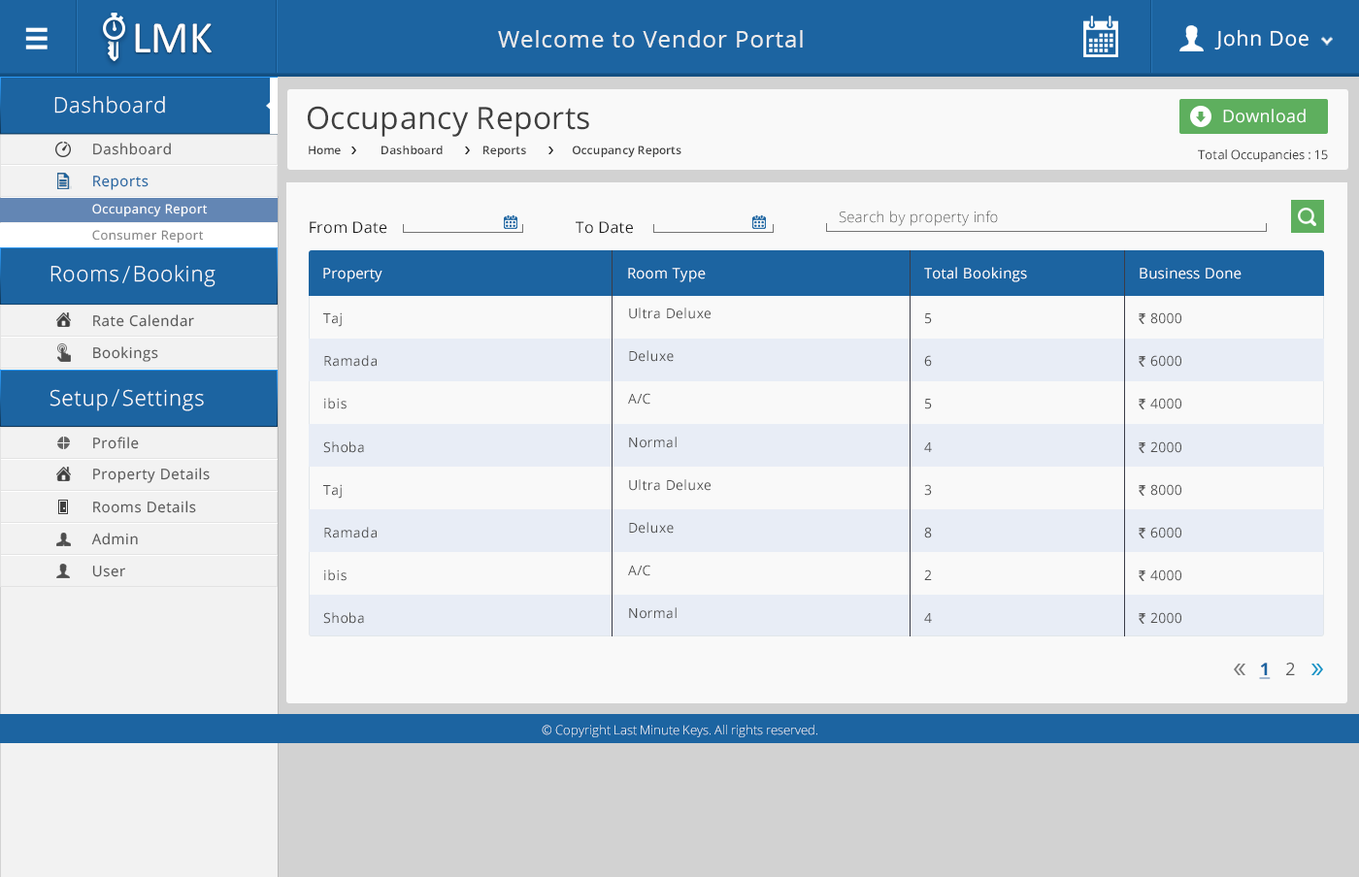
<style>
.page{position:relative;width:1359px;height:877px;background:#f9f9f9}
.page>*{position:absolute;margin:0}
.t1{font:45.2px "Calibri";letter-spacing:0.01em;color:#ffffff}
.t2{font:20.4px "OpenSans";letter-spacing:0.04em;color:#ffffff}
.t3{font:23.3px "OpenSans";letter-spacing:0.04em;color:#ececec}
.t4{font:24.9px "NexaBold";letter-spacing:0.04em;color:#f9f9f9}
.t5{font:21.4px "OpenSans-Light";letter-spacing:0.04em;color:#ffffff}
.t6{font:31.1px "OpenSans";letter-spacing:0.01em;color:#3f3f3f}
.t7{font:17.5px "OpenSans";letter-spacing:0.01em;color:#ffffff}
.t8{font:14.6px "OpenSans";letter-spacing:0.04em;color:#585858}
.t9{font:11.6px "OpenSans-Semibold";letter-spacing:0.01em;color:#3f3f3f}
.t10{font:12.6px "OpenSans";letter-spacing:0.01em;color:#3f3f3f}
.t11{font:14.6px "OpenSans";letter-spacing:0.04em;color:#1c64a1}
.t12{font:12.6px "OpenSans";letter-spacing:0.04em;color:#ffffff}
.t13{font:15.5px "OpenSans";letter-spacing:0.01em;color:#1d1d1d}
.t14{font:14.6px "OpenSans-Light";letter-spacing:0.02em;color:#505150}
.t15{font:12.6px "OpenSans";letter-spacing:0.04em;color:#848484}
.t16{font:14.6px "OpenSans";letter-spacing:0.02em;color:#ffffff}
.t17{font:13.6px/42.9px "OpenSans";letter-spacing:0.02em;color:#4f4f4f}
.t18{font:17.5px "OpenSans-Bold";letter-spacing:0.02em;color:#1c64a1;text-transform:uppercase;text-decoration:underline}
.t19{font:17.5px "OpenSans";letter-spacing:0.02em;color:#5a5a5a;text-transform:uppercase}
.t20{font:12.6px "OpenSans-Light";color:#ffffff}
</style>
<div class="page">
<p class="t1" style="left:135px;top:23px;width:77px;height:30px">LMK</p>
<p class="t2" style="left:1214px;top:29px;width:94px;height:21px">John Doe</p>
<p class="t3" style="left:498px;top:30px;width:305px;height:18px">Welcome to Vendor Portal</p>
<p class="t4" style="left:1321px;top:36px;width:12px;height:10px;rotate:90deg">&gt;</p>
<p class="t5" style="left:54px;top:96px;width:111px;height:18px">Dashboard</p>
<p class="t6" style="left:308px;top:106px;width:281px;height:31px">Occupancy Reports</p>
<p class="t7" style="left:1223px;top:109px;width:83px;height:14px">Download</p>
<p class="t8" style="left:93px;top:143px;width:78px;height:12px">Dashboard</p>
<p class="t9" style="left:309px;top:146px;width:372px;height:11px">Home             Dashboard             Reports               Occupancy Reports</p>
<p class="t10" style="left:1198px;top:149px;width:130px;height:13px">Total Occupancies : 15</p>
<p class="t11" style="left:93px;top:176px;width:56px;height:14px">Reports</p>
<p class="t12" style="left:92px;top:204px;width:116px;height:13px">Occupancy Report</p>
<p class="t13" style="left:310px;top:221px;width:77px;height:13px">From Date</p>
<p class="t13" style="left:576px;top:221px;width:57px;height:13px">To Date</p>
<p class="t14" style="left:839px;top:211px;width:159px;height:15px">Search by property info</p>
<p class="t15" style="left:92px;top:230px;width:112px;height:14px">Consumer Report</p>
<p class="t5" style="left:50px;top:265px;width:165px;height:22px">Rooms  Booking</p>
<p class="t16" style="left:323px;top:268px;width:59px;height:14px">Property</p>
<p class="t16" style="left:628px;top:268px;width:78px;height:14px">Room Type</p>
<p class="t16" style="left:924px;top:267px;width:103px;height:15px">Total Bookings</p>
<p class="t16" style="left:1140px;top:268px;width:101px;height:12px">Business Done</p>
<p class="t8" style="left:93px;top:314px;width:101px;height:13px">Rate Calendar</p>
<p class="t17" style="left:323px;top:313px;width:54px;height:311px">Taj<br>Ramada<br>ibis<br>Shoba<br>Taj<br>Ramada<br>ibis<br>Shoba</p>
<p class="t17" style="left:628px;top:308px;width:83px;height:311px">Ultra Deluxe<br>Deluxe<br>A/C<br>Normal<br>Ultra Deluxe<br>Deluxe<br>A/C<br>Normal</p>
<p class="t17" style="left:924px;top:314px;width:8px;height:309px">5<br>6<br>5<br>4<br>3<br>8<br>2<br>4</p>
<p class="t17" style="left:1150px;top:313px;width:31px;height:311px">8000<br>6000<br>4000<br>2000<br>8000<br>6000<br>4000<br>2000</p>
<p class="t8" style="left:93px;top:347px;width:65px;height:15px">Bookings</p>
<p class="t5" style="left:50px;top:389px;width:154px;height:23px">Setup  Settings</p>
<p class="t8" style="left:93px;top:437px;width:46px;height:12px">Profile</p>
<p class="t8" style="left:93px;top:468px;width:117px;height:15px">Property Details</p>
<p class="t8" style="left:93px;top:501px;width:103px;height:12px">Rooms Details</p>
<p class="t8" style="left:91px;top:533px;width:47px;height:13px">Admin</p>
<p class="t8" style="left:92px;top:566px;width:33px;height:12px">User</p>
<p class="t18" style="left:1259px;top:663px;width:36px;height:16px">1<span class="t19">   2</span></p>
<p class="t20" style="left:542px;top:725px;width:275px;height:13px">© Copyright Last Minute Keys. All rights reserved.</p>
</div>
